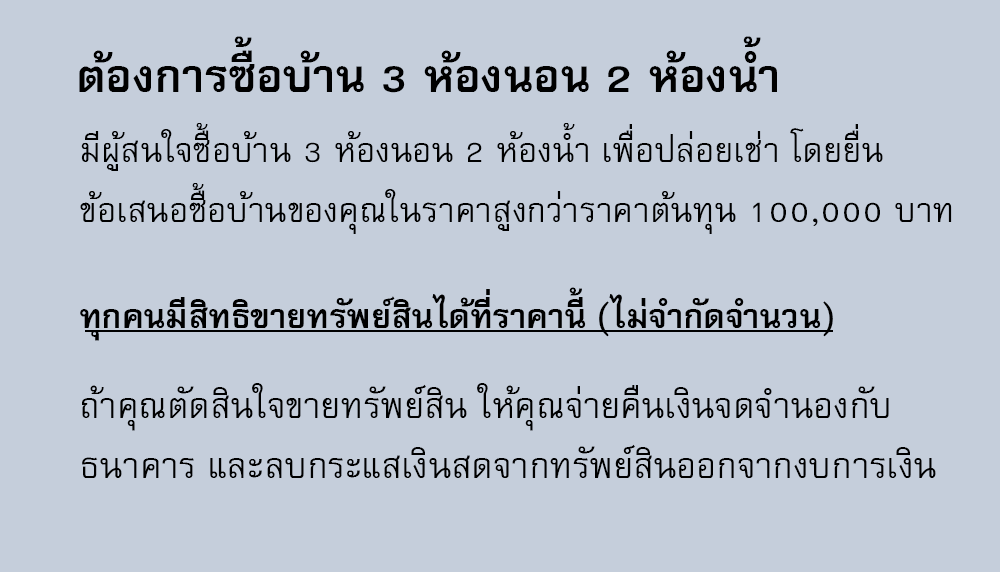
<style>
.page{position:relative;width:1000px;height:572px;background:#c5cedb}
.page>*{position:absolute;margin:0}
.t1{font:64px "FreesiaUPCBold";color:#000000}
.t2{font:48px/60px "FreesiaUPC";color:#000000}
.t3{font:47px "FreesiaUPCBold";color:#000000}
.t4{font:50px/60px "FreesiaUPC";color:#000000}
</style>
<div class="page">
<p class="t1" style="left:79px;top:36px;width:698px;height:57px">ต้องการซื้อบ้าน 3 ห้องนอน 2 ห้องน้ำ</p>
<p class="t2" style="left:80px;top:123px;width:872px;height:111px">มีผู้สนใจซื้อบ้าน 3 ห้องนอน 2 ห้องน้ำ เพื่อปล่อยเช่า โดยยื่น<br>ข้อเสนอซื้อบ้านของคุณในราคาสูงกว่าราคาต้นทุน 100,000 บาท</p>
<p class="t3" style="left:80px;top:287px;width:753px;height:54px">ทุกคนมีสิทธิขายทรัพย์สินได้ที่ราคานี้ (ไม่จำกัดจำนวน)</p>
<p class="t4" style="left:82px;top:383px;width:854px;height:95px">ถ้าคุณตัดสินใจขายทรัพย์สิน ให้คุณจ่ายคืนเงินจดจำนองกับ<br>ธนาคาร และลบกระแสเงินสดจากทรัพย์สินออกจากงบการเงิน</p>
</div>
